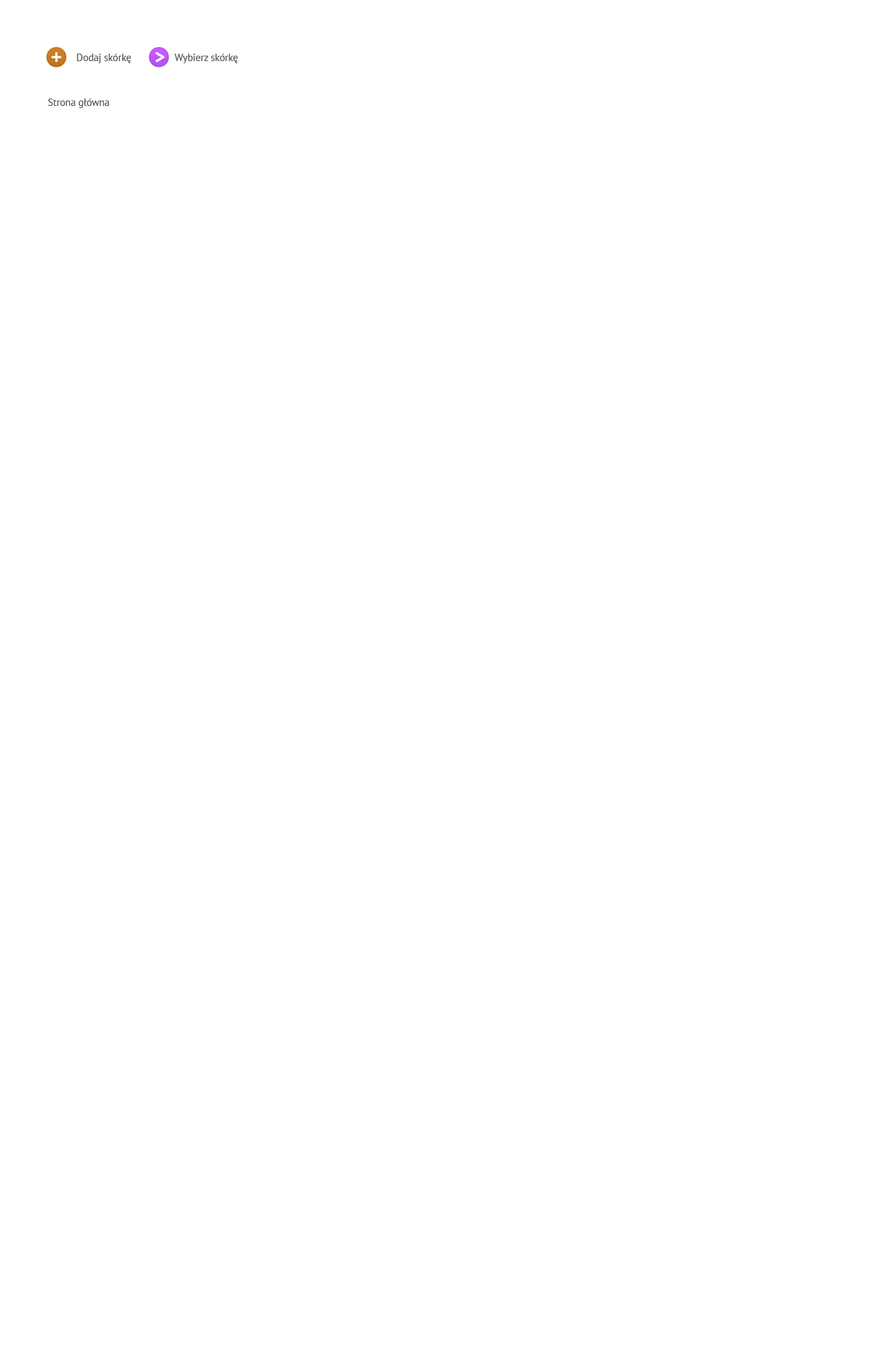
<style>
.page{position:relative;width:869px;height:1372px;background:#ffffff}
.page>*{position:absolute;margin:0}
.t1{font:10.2px "PTSans-Regular";letter-spacing:-0.01em;color:#585858}
.t2{font:20.4px "PTSans-Bold";letter-spacing:-0.01em;color:#ffffff}
</style>
<div class="page">
<p class="t1" style="left:77px;top:54px;width:54px;height:9px">Dodaj skórkę</p>
<p class="t2" style="left:155px;top:52px;width:10px;height:10px">&gt;</p>
<p class="t1" style="left:175px;top:54px;width:63px;height:9px">Wybierz skórkę</p>
<p class="t1" style="left:48px;top:98px;width:61px;height:10px">Strona główna</p>
</div>
